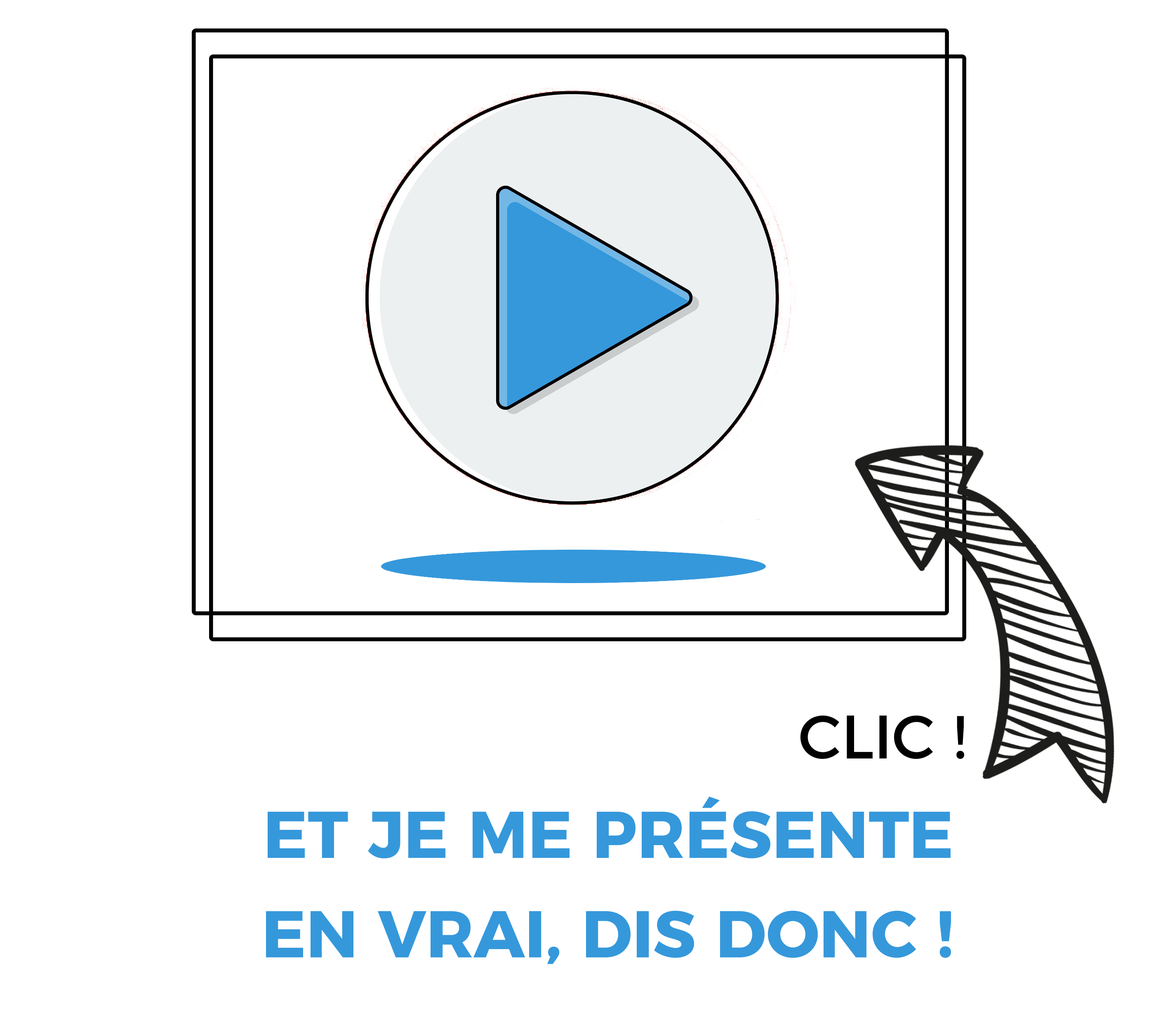
<style>
.page{position:relative;width:1158px;height:1030px;background:#ffffff}
.page>*{position:absolute;margin:0}
.t1{font:66px/99.4px "Montserrat-Bold";color:#3598db;text-transform:uppercase}
.t2{font:61px/82.5px "Montserrat-Regular";color:#000000;text-transform:uppercase}
</style>
<div class="page">
<p class="t1" style="left:266px;top:715px;width:698px;height:249px;text-align:right"><span class="t2">clic !<br></span>et Je me présente <br>en vrai, dis donc !</p>
</div>
